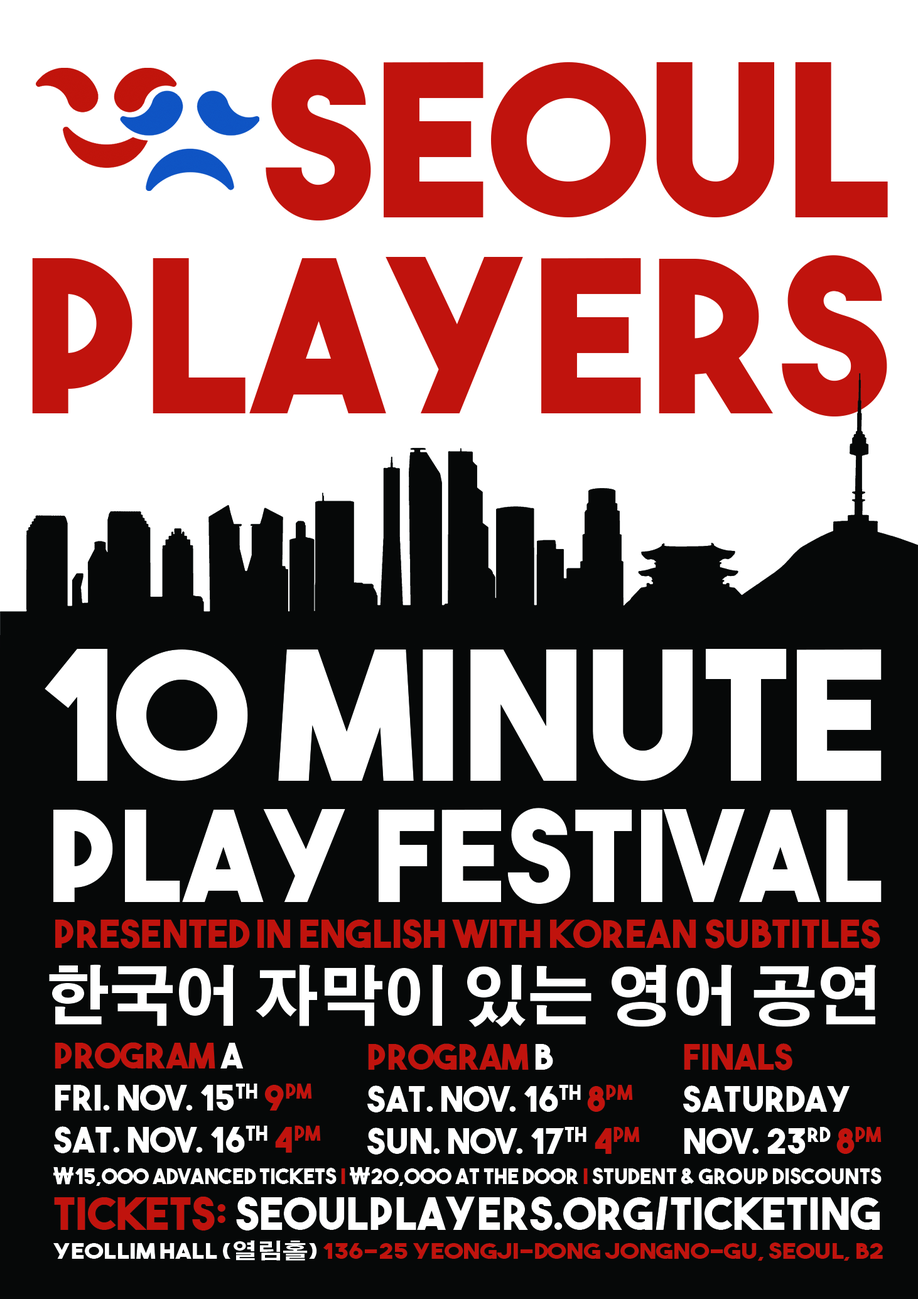
<style>
.page{position:relative;width:918px;height:1299px;background:#ffffff}
.page>*{position:absolute;margin:0}
.t1{font:211.1px/196.3px "TheBoldFont";color:#c0130d}
.t2{font:178.9px "TheBoldFont";color:#ffffff}
.t3{font:125.5px "TheBoldFont";color:#ffffff}
.t4{font:38.5px "TheBoldFont";color:#c0130d}
.t5{font:65.1px "AdobeGothicStd-Bold";color:#ffffff}
.t6{font:34.9px "TheBoldFont";color:#ffffff}
.t7{font:34.9px "TheBoldFont";color:#c0130d}
.t8{font:21.5px "TheBoldFont";color:#ffffff}
.t9{font:21.5px "AdobeGothicStd-Bold";color:#ffffff;font-weight:bold}
.t10{font:21.5px "TheBoldFont";color:#c0130d}
.t11{font:44.7px "TheBoldFont";color:#ffffff}
.t12{font:44.7px "TheBoldFont";color:#c0130d}
.t13{font:21.5px "TheBoldFont";color:#c0130d;scale:1.18 1}
.t14{font:21.5px "TheBoldFont";color:#ffffff;scale:1.18 1}
.t15{font:21.5px "AdobeGothicStd-Bold";color:#ffffff;scale:1.18 1}
</style>
<div class="page">
<p class="t1" style="left:32px;top:59px;width:856px;height:357px;text-align:right">Seoul<br>Players</p>
<p class="t2" style="left:45px;top:649px;width:837px;height:132px">10 minute</p>
<p class="t3" style="left:53px;top:808px;width:829px;height:96px">play festival</p>
<p class="t4" style="left:55px;top:919px;width:825px;height:29px">presented in english with korean subtitles</p>
<p class="t5" style="left:49px;top:964px;width:827px;height:63px">한국어 자막이 있는 영어 공연</p>
<p class="t6" style="left:54px;top:1042px;width:267px;height:111px"><span class="t7">program </span>a<br>Fri. Nov. 15th <span class="t7">9PM<br></span>Sat. Nov. 16th <span class="t7">4PM</span></p>
<p class="t6" style="left:367px;top:1043px;width:273px;height:111px"><span class="t7">program </span>B<br>Sat. Nov. 16th <span class="t7">8PM<br></span>Sun. Nov. 17th <span class="t7">4PM</span></p>
<p class="t6" style="left:683px;top:1043px;width:199px;height:111px"><span class="t7">finals<br></span>Saturday<br>Nov. 23rd<span class="t7"> 8PM</span></p>
<p class="t8" style="left:53px;top:1167px;width:829px;height:19px"><span class="t9">₩</span>15,000 advanced tickets <span class="t10">| </span><span class="t9">₩</span>20,000 at the door <span class="t10">|</span> student &amp; group discounts</p>
<p class="t11" style="left:54px;top:1196px;width:826px;height:34px"><span class="t12">tickets: </span>seoulplayers.org/ticketing</p>
<p class="t13" style="left:53px;top:1240px;width:830px;height:20px"><span class="t14">YEOLLIM HALL (</span><span class="t15">열림홀</span><span class="t14">) </span>136-25 Yeongji-dong Jongno-gu, Seoul, B2</p>
</div>
